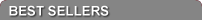
<style>
.page{position:relative;width:202px;height:20px;background:#858585}
.page>*{position:absolute;margin:0}
.t1{font:13.3px "Arial-BoldMT";color:#ffffff}
</style>
<div class="page">
<p class="t1" style="left:9px;top:5px;width:100px;height:11px">BEST SELLERS</p>
</div>
